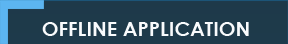
<style>
.page{position:relative;width:288px;height:44px;background:#1e3a4a}
.page>*{position:absolute;margin:0}
.t1{font:20px "CenturyGothic-Bold";color:#f9fbfd}
</style>
<div class="page">
<p class="t1" style="left:42px;top:22px;width:207px;height:14px">OFFLINE APPLICATION</p>
</div>
